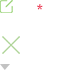
<style>
.page{position:relative;width:70px;height:70px;background:#ffffff}
.page>*{position:absolute;margin:0}
.t1{font:14px "FZLTHK--GBK1-0";letter-spacing:-0.025em;color:#ea2e49}
</style>
<div class="page">
<p class="t1" style="left:37px;top:4px;width:6px;height:6px">*</p>
</div>
